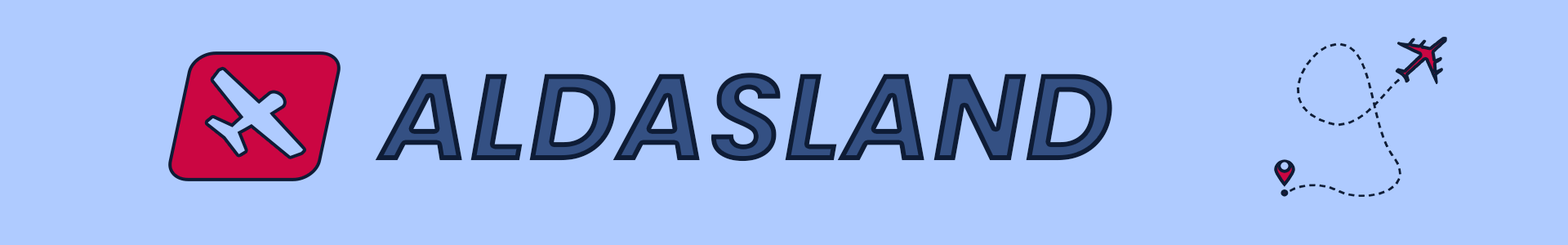
<style>
.page{position:relative;width:1568px;height:245px;background:#afcbff}
.page>*{position:absolute;margin:0}
.t1{font:122.5px "Poppins-BoldItalic"}
</style>
<div class="page">
<p class="t1" style="left:375px;top:73px;width:737px;height:89px">ALDASLAND</p>
</div>
